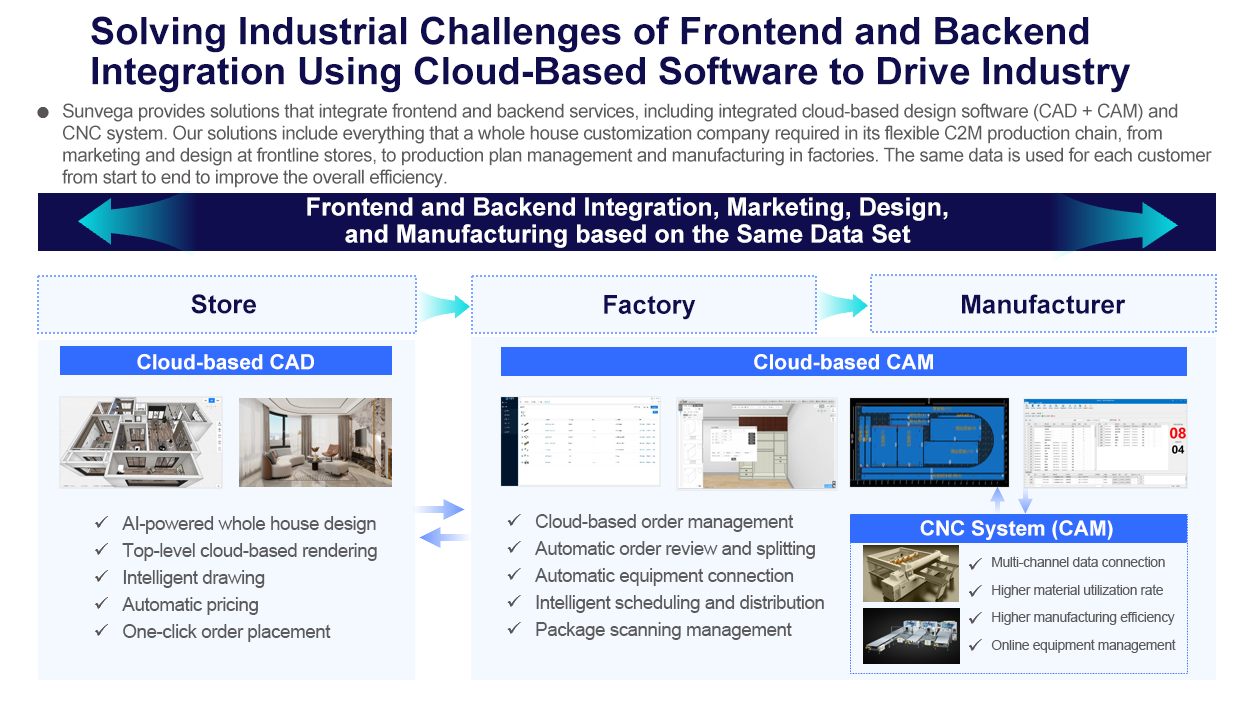
<style>
.page{position:relative;width:1258px;height:724px;background:#ffffff}
.page>*{position:absolute;margin:0}
.t1{font:38px/40px "Arial-BoldMT";color:#100d4f}
.t2{font:19px/22px "ArialMT";letter-spacing:-0.03em;color:#5b5b5b}
.t3{font:25px/27px "Arial-BoldMT";color:#ffffff}
.t4{font:26px "Arial-BoldMT";color:#100d4f}
.t5{font:21px "Arial-BoldMT";color:#ffffff}
.t6{font:19px/27px "ArialMT";letter-spacing:-0.03em;color:#5b5b5b}
.t7{font:14px/27.5px "ArialMT";letter-spacing:-0.03em;color:#5b5b5b}
</style>
<div class="page">
<p class="t1" style="left:91px;top:16px;width:1040px;height:77px">Solving Industrial Challenges of Frontend and Backend Integration Using Cloud-Based Software to Drive Industry Upgrades</p>
<p class="t2" style="left:62px;top:103px;width:1150px;height:85px">Sunvega provides solutions that integrate frontend and backend services, including integrated cloud-based design software (CAD + CAM) and CNC system. Our solutions include everything that a whole house customization company required in its flexible C2M production chain, from marketing and design at frontline stores, to production plan management and manufacturing in factories. The same data is used for each customer from start to end to improve the overall efficiency.</p>
<p class="t3" style="left:307px;top:197px;width:641px;height:51px;text-align:center">Frontend and Backend Integration, Marketing, Design, and Manufacturing based on the Same Data Set</p>
<p class="t4" style="left:191px;top:294px;width:65px;height:20px">Store</p>
<p class="t4" style="left:962px;top:294px;width:164px;height:20px">Manufacturer</p>
<p class="t4" style="left:604px;top:295px;width:92px;height:25px">Factory</p>
<p class="t5" style="left:137px;top:354px;width:177px;height:16px">Cloud-based CAD</p>
<p class="t5" style="left:754px;top:354px;width:179px;height:16px">Cloud-based CAM</p>
<p class="t6" style="left:122px;top:516px;width:255px;height:126px">AI-powered whole house design<br>Top-level cloud-based rendering<br>Intelligent drawing<br>Automatic pricing<br>One-click order placement</p>
<p class="t6" style="left:535px;top:514px;width:289px;height:126px">Cloud-based order management<br>Automatic order review and splitting<br>Automatic equipment connection<br>Intelligent scheduling and distribution<br>Package scanning management</p>
<p class="t5" style="left:920px;top:520px;width:193px;height:20px">CNC System (CAM)</p>
<p class="t7" style="left:991px;top:556px;width:185px;height:97px">Multi-channel data connection<br>Higher material utilization rate<br>Higher manufacturing efficiency<br>Online equipment management</p>
</div>
